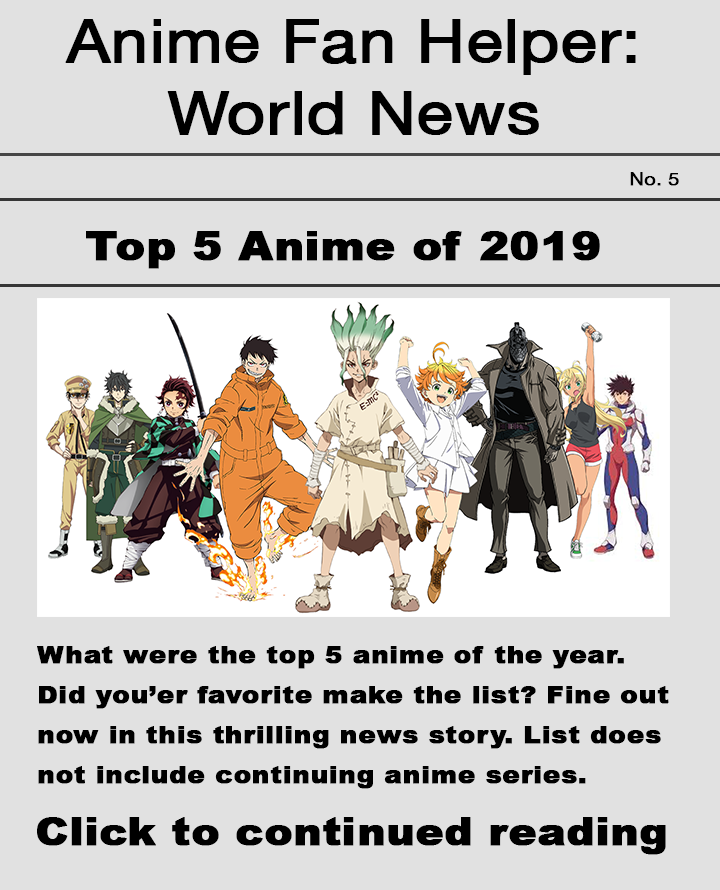
<style>
.page{position:relative;width:720px;height:890px;background:#e1e1e1}
.page>*{position:absolute;margin:0}
.t1{font:60px "HelveticaNeue";color:#000000;font-weight:bold;scale:1.1 1}
.t2{font:18px "HelveticaNeue";color:#000000;font-weight:bold;scale:1.1 1}
.t3{font:40px "Arial-Black";color:#000000;font-weight:bold;scale:1.1 1}
.t4{font:24px/40px "Arial-Black";color:#000000;font-weight:bold;scale:1.1 1}
.t5{font:38px "Arial-Black";color:#000000;font-weight:bold;scale:1.1 1}
</style>
<div class="page">
<p class="t1" style="left:65px;top:19px;width:571px;height:116px;text-align:center">Anime Fan Helper: World News</p>
<p class="t2" style="left:630px;top:172px;width:49px;height:14px">No. 5</p>
<p class="t3" style="left:86px;top:231px;width:514px;height:38px">Top 5 Anime of 2019</p>
<p class="t4" style="left:37px;top:646px;width:632px;height:143px">What were the top 5 anime of the year. Did you’er favorite make the list? Fine out now in this thrilling news story. List does not include continuing anime series.                   &lt;/div&gt;</p>
<p class="t5" style="left:37px;top:817px;width:629px;height:38px">Click to continued reading</p>
</div>
